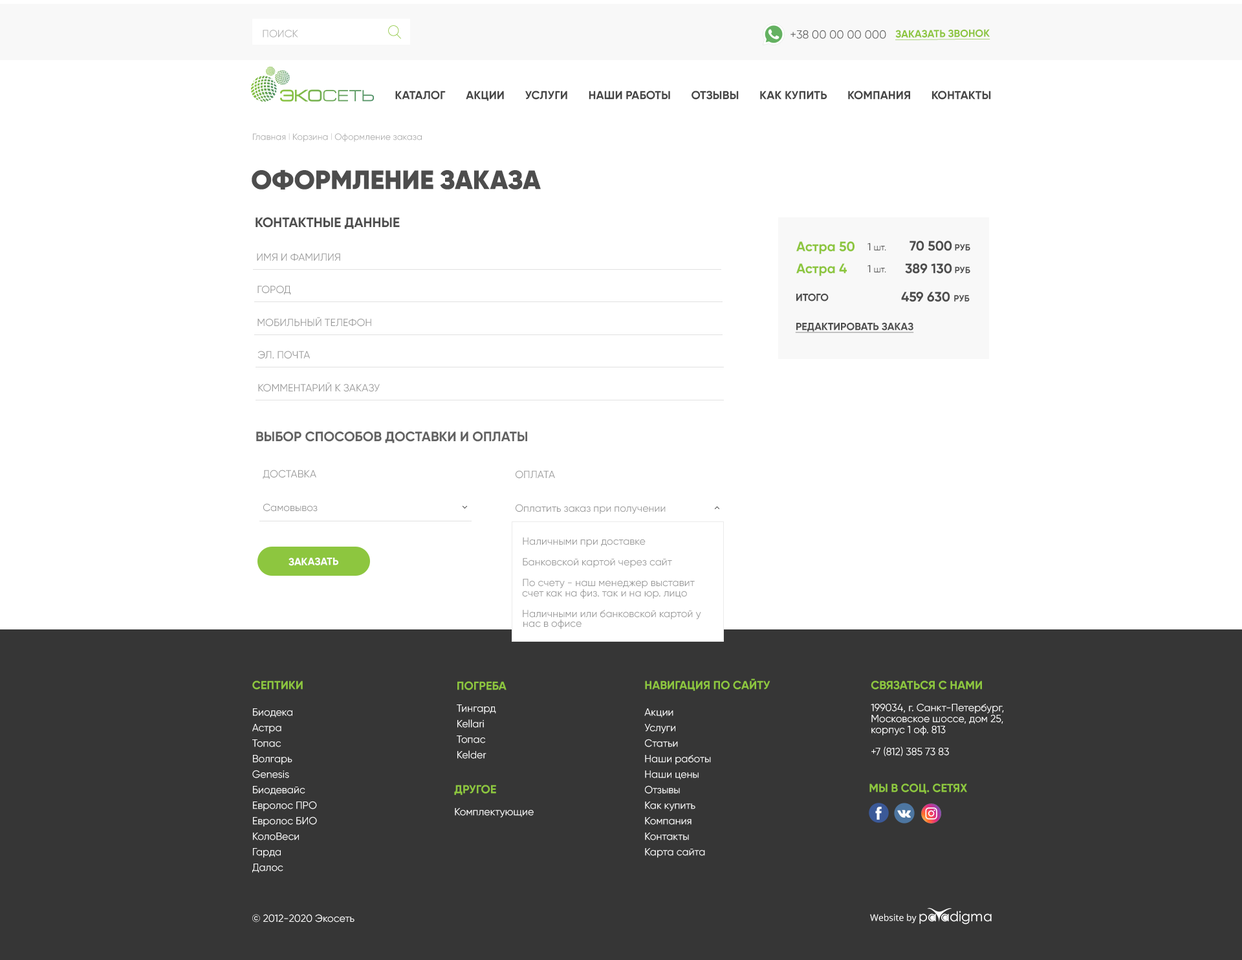
<style>
.page{position:relative;width:1242px;height:960px;background:#ffffff}
.page>*{position:absolute;margin:0}
.t1{font:10.4px "Gilroy-Regular";color:#b1b1b1;text-transform:uppercase}
.t2{font:11.6px "Gilroy-Regular";color:#636363;text-transform:uppercase}
.t3{font:10.4px "Gilroy-Bold";color:#8dc63f;text-transform:uppercase;text-decoration:underline}
.t4{font:11.6px "Gilroy-Bold";color:#464646;text-transform:uppercase}
.t5{font:9.1px "Gilroy-Regular";color:#acacac}
.t6{font:9.1px "Gilroy-Regular";color:#d7d7d7}
.t7{font:26.5px "Gilroy-Black";color:#4c4c4c;text-transform:uppercase}
.t8{font:13.6px "Gilroy-Bold";color:#4d4d4d;text-transform:uppercase}
.t9{font:13.6px "Gilroy-Bold";color:#8dc63f}
.t10{font:9.1px "Gilroy-Regular";color:#4c4c4c}
.t11{font:10.4px "Gilroy-Regular";color:#4c4c4c;text-transform:uppercase}
.t12{font:13.6px "Gilroy-Bold";color:#4c4c4c;text-transform:uppercase}
.t13{font:9.1px "Gilroy-Bold";color:#4c4c4c;text-transform:uppercase}
.t14{font:10.4px "Gilroy-Regular";color:#999999;text-transform:uppercase}
.t15{font:10.4px "Gilroy-Bold";color:#4c4c4c;text-transform:uppercase}
.t16{font:10.4px "Gilroy-Bold";color:#4c4c4c;text-transform:uppercase;text-decoration:underline}
.t17{font:13.6px "Gilroy-Bold";color:#626262;text-transform:uppercase}
.t18{font:10.4px "Gilroy-Regular";color:#999999}
.t19{font:10.4px/20.7px "Gilroy-Regular";color:#999999}
.t20{font:10.4px "Gilroy-Bold";color:#ffffff;text-transform:uppercase}
.t21{font:10.4px/15.5px "Gilroy-Regular";color:#ffffff}
.t22{font:11.6px/11px "Gilroy-Bold";color:#8dc63f;text-transform:uppercase}
.t23{font:10.4px/11px "Gilroy-Regular";color:#ffffff}
.t24{font:11.6px/26.5px "Gilroy-Bold";color:#ffffff;text-transform:uppercase}
.t25{font:11.6px "Gilroy-Bold";color:#8dc63f;text-transform:uppercase}
.t26{font:11.6px "Gilroy-Bold";color:#ffffff;text-transform:uppercase}
.t27{font:10.4px "Gilroy-Regular";color:#ffffff}
.t28{font:9.1px "OpenSans";color:#ffffff}
</style>
<div class="page">
<p class="t1" style="left:263px;top:30px;width:35px;height:8px">поиск</p>
<p class="t2" style="left:791px;top:30px;width:95px;height:9px">+38 00 00 00 000</p>
<p class="t3" style="left:895px;top:29px;width:95px;height:11px;rotate:-1deg">заказать звонок</p>
<p class="t4" style="left:395px;top:91px;width:596px;height:10px">Каталог       Акции       Услуги       Наши работы       отзывы       Как купить       Компания       Контакты</p>
<p class="t5" style="left:253px;top:133px;width:169px;height:9px">Главная <span class="t6">l </span>Корзина <span class="t6">l </span>Оформление заказа</p>
<p class="t7" style="left:252px;top:169px;width:289px;height:21px">Оформление заказа</p>
<p class="t8" style="left:256px;top:217px;width:144px;height:12px">Контактные данные</p>
<p class="t9" style="left:796px;top:241px;width:59px;height:13px">Астра 50</p>
<p class="t10" style="left:868px;top:243px;width:18px;height:8px"><span class="t11">1 </span>шт.</p>
<p class="t12" style="left:910px;top:241px;width:60px;height:10px">70 500 <span class="t13">руб</span></p>
<p class="t14" style="left:257px;top:253px;width:83px;height:8px">Имя и фамилия</p>
<p class="t9" style="left:796px;top:263px;width:51px;height:13px">Астра 4</p>
<p class="t10" style="left:868px;top:265px;width:18px;height:8px"><span class="t11">1 </span>шт.</p>
<p class="t12" style="left:905px;top:263px;width:65px;height:11px">389 130 <span class="t13">руб</span></p>
<p class="t14" style="left:257px;top:285px;width:34px;height:10px">Город</p>
<p class="t15" style="left:796px;top:293px;width:33px;height:8px">Итого</p>
<p class="t12" style="left:901px;top:292px;width:69px;height:10px">459 630 <span class="t13">руб</span></p>
<p class="t14" style="left:257px;top:317px;width:114px;height:10px">Мобильный телефон</p>
<p class="t16" style="left:795px;top:322px;width:119px;height:11px">Редактировать заказ</p>
<p class="t14" style="left:257px;top:351px;width:53px;height:8px">Эл. почта</p>
<p class="t14" style="left:258px;top:382px;width:122px;height:10px">Комментарий к заказу</p>
<p class="t17" style="left:256px;top:431px;width:271px;height:12px">Выбор способов доставки и оплаты</p>
<p class="t14" style="left:263px;top:470px;width:53px;height:9px">Доставка</p>
<p class="t14" style="left:516px;top:470px;width:39px;height:9px">Оплата</p>
<p class="t18" style="left:263px;top:503px;width:55px;height:9px">Самовывоз</p>
<p class="t18" style="left:516px;top:504px;width:150px;height:10px">Оплатить заказ при получении</p>
<p class="t19" style="left:523px;top:537px;width:172px;height:52px">Наличными при доставке<br>Банковской картой через сайт<br>По счету - наш менеджер выставит</p>
<p class="t20" style="left:289px;top:558px;width:49px;height:8px;rotate:-1deg">заказать</p>
<p class="t19" style="left:522px;top:589px;width:179px;height:31px">счет как на физ. так и на юр. лицо<br>Наличными или банковской картой у</p>
<p class="t18" style="left:523px;top:619px;width:59px;height:10px">нас в офисе</p>
<p class="t21" style="left:252px;top:681px;width:65px;height:192px"><span class="t22">Септики<br><br></span>Биодека <br>Астра <br>Топас <br>Волгарь <br>Genesis <br>Биодевайс <br>Евролос ПРО <br>Евролос БИО <br>КолоВеси <br>Гарда <br>Далос</p>
<p class="t21" style="left:457px;top:681px;width:50px;height:78px"><span class="t22">погреба<br></span><span class="t23"><br>Тингард<br></span>Kellari<br>Топас<br>Kelder</p>
<p class="t21" style="left:644px;top:679px;width:126px;height:179px"><span class="t24"><br></span><span class="t22">навигация по сайту<br></span><span class="t23"><br>Акции   </span>    <br>Услуги       <br>Статьи       <br>Наши работы <br>Наши цены<br>Отзывы      <br>Как купить       <br>Компания       <br>Контакты<br>Карта сайта</p>
<p class="t23" style="left:871px;top:681px;width:133px;height:75px"><span class="t24"><br></span><span class="t22">связаться с нами <br></span><br>199034, г. Санкт-Петербург, <br>Московское шоссе, дом 25, <br>корпус 1 оф. 813<br><br>+7 (812) 385 73 83</p>
<p class="t23" style="left:454px;top:785px;width:80px;height:33px"><span class="t24"><br></span><span class="t22">Другое<br></span><br>Комплектующие</p>
<p class="t25" style="left:869px;top:783px;width:98px;height:11px"><span class="t26"><br></span>мы в соц. сетях</p>
<p class="t27" style="left:252px;top:914px;width:103px;height:9px">© 2012-2020 Экосеть</p>
<p class="t28" style="left:870px;top:913px;width:47px;height:10px">Website by</p>
</div>
